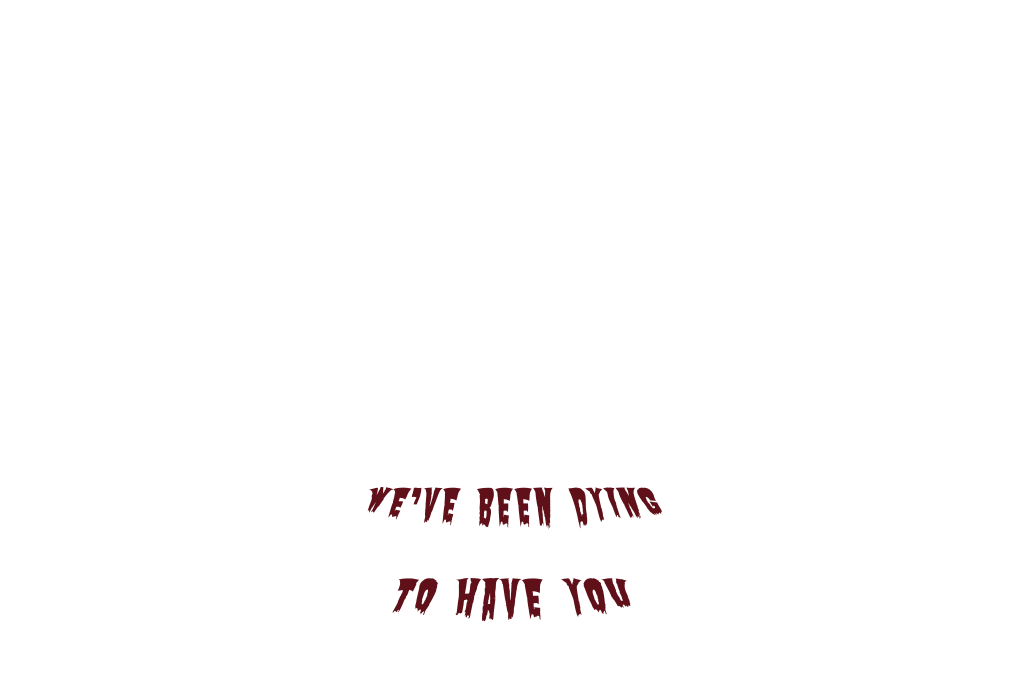
<style>
.page{position:relative;width:1024px;height:681px;background:#ffffff}
.page>*{position:absolute;margin:0}
.t1{font:30px "Butcherman-Regular";color:#601019}
.t2{font:35px "Butcherman-Regular";color:#601019}
</style>
<div class="page">
<p class="t1" style="left:367px;top:487px;width:295px;height:43px">We’ve   been   dying</p>
<p class="t2" style="left:392px;top:578px;width:239px;height:44px">To   have   you</p>
</div>
